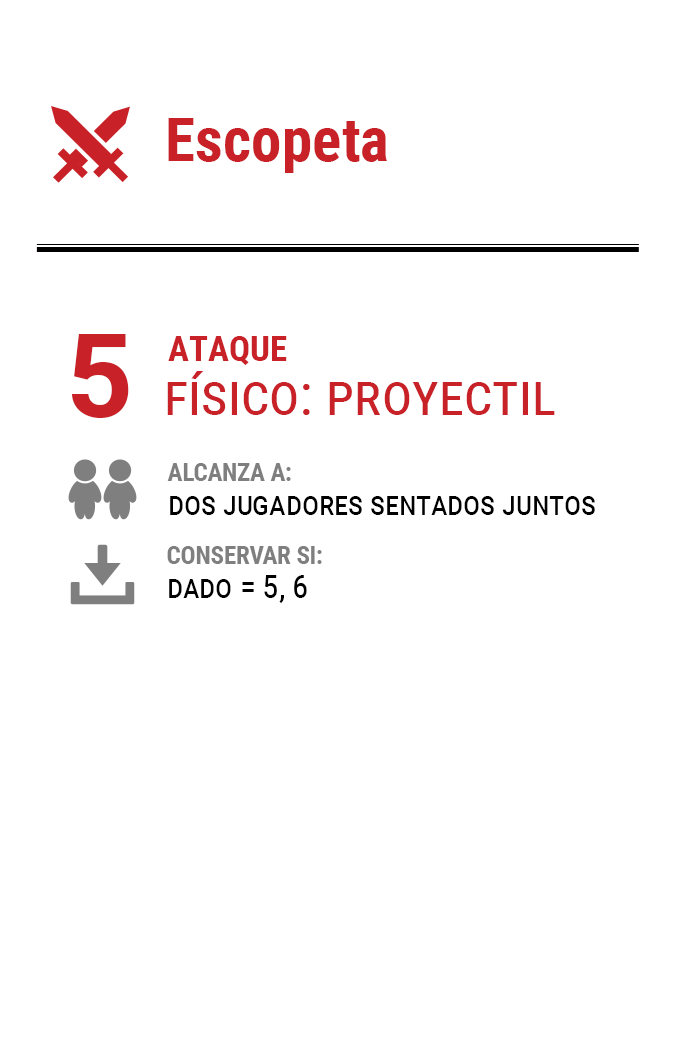
<style>
.page{position:relative;width:675px;height:1050px;background:#ffffff}
.page>*{position:absolute;margin:0}
.t1{font:61.2px "RobotoCondensed-Bold";color:#c82127}
.t2{font:116.7px "Roboto-Bold";letter-spacing:-0.16em;color:#c82127}
.t3{font:35px "RobotoCondensed-Bold";color:#c82127}
.t4{font:58.3px "RobotoCondensed-Regular";color:#c82127;font-variant:small-caps}
.t5{font:33.3px/33.3px "RobotoCondensed-Regular";letter-spacing:-0.01em;color:#000000;font-variant:small-caps}
.t6{font:25px/33.3px "RobotoCondensed-Bold";letter-spacing:-0.01em;color:#7f7f7f}
</style>
<div class="page">
<p class="t1" style="left:168px;top:118px;width:219px;height:55px">Escopeta</p>
<p class="t2" style="left:72px;top:334px;width:57px;height:84px">5</p>
<p class="t3" style="left:168px;top:336px;width:119px;height:29px">ATAQUE</p>
<p class="t4" style="left:167px;top:371px;width:388px;height:44px">físico: proyectil</p>
<p class="t5" style="left:167px;top:463px;width:428px;height:52px"><span class="t6">ALCANZA A:<br></span>dos jugadores sentados juntos</p>
<p class="t6" style="left:167px;top:546px;width:155px;height:57px">CONSERVAR SI:<br><span class="t5">dado = 5, 6</span></p>
</div>
